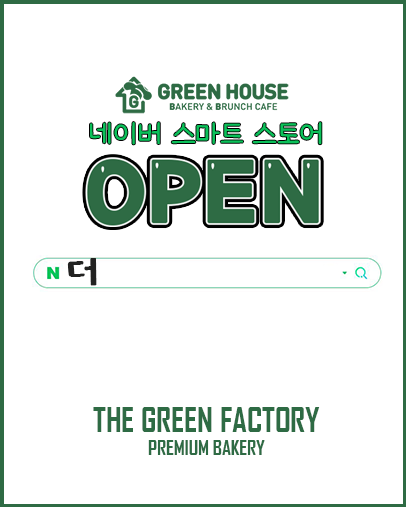
<style>
.page{position:relative;width:406px;height:507px;background:#ffffff}
.page>*{position:absolute;margin:0}
.t1{font:32.8px "omyu_pretty";color:#0bc15a}
.t2{font:43px "KOTRA-HOPE";color:#222221}
.t3{font:32.8px "AgencyFB-Bold";color:#2e6b44}
.t4{font:19.7px "AgencyFB-Bold";color:#2e6b44}
</style>
<div class="page">
<p class="t1" style="left:90px;top:122px;width:232px;height:23px">네이버 스마트 스토어</p>
<p class="t2" style="left:67px;top:258px;width:30px;height:28px">더</p>
<p class="t3" style="left:93px;top:407px;width:227px;height:48px;text-align:center">THE GREEN FACTORY<br><span class="t4">PREMIUM BAKERY</span></p>
</div>
